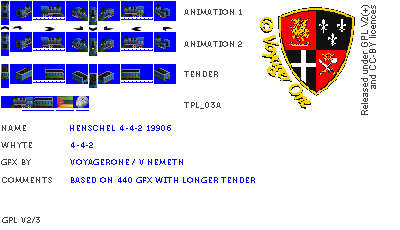
<style>
.page{position:relative;width:400px;height:230px;background:#ffffff}
.page>*{position:absolute;margin:0}
.t1{font:8px "Museo700-Regular";letter-spacing:0.075em;color:#404040;text-transform:uppercase}
.t2{font:8px "Museo700-Regular";letter-spacing:0.075em;color:#0000ff;text-transform:uppercase}
</style>
<div class="page">
<p class="t1" style="left:184px;top:9px;width:58px;height:6px">Animation 1</p>
<p class="t1" style="left:184px;top:41px;width:58px;height:6px">Animation 2</p>
<p class="t1" style="left:184px;top:71px;width:34px;height:6px">tender</p>
<p class="t1" style="left:184px;top:102px;width:37px;height:7px">tpl_03a</p>
<p class="t1" style="left:2px;top:125px;width:24px;height:6px">name</p>
<p class="t2" style="left:70px;top:125px;width:101px;height:6px">Henschel 4-4-2 19906</p>
<p class="t1" style="left:1px;top:142px;width:31px;height:6px">whyte</p>
<p class="t2" style="left:71px;top:142px;width:22px;height:6px">4-4-2</p>
<p class="t1" style="left:1px;top:159px;width:30px;height:6px">gfx by</p>
<p class="t2" style="left:70px;top:159px;width:113px;height:6px">voyagerone / v nemetn</p>
<p class="t1" style="left:2px;top:177px;width:50px;height:6px">comments</p>
<p class="t2" style="left:71px;top:177px;width:184px;height:6px">based on 440 gfx with longer tender</p>
<p class="t1" style="left:2px;top:217px;width:38px;height:6px">gpl v2/3</p>
</div>
